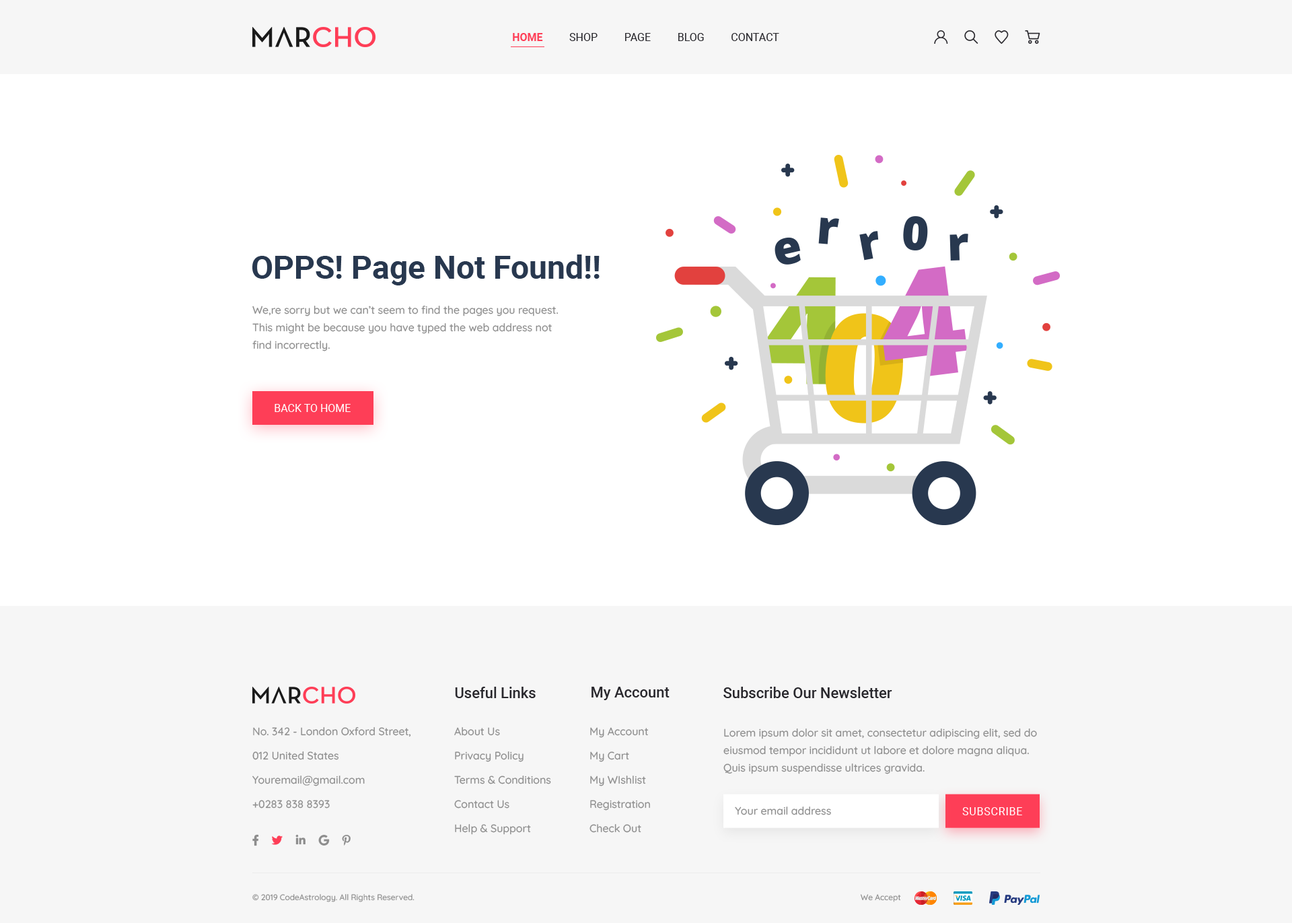
<style>
.page{position:relative;width:1292px;height:923px;background:#ffffff}
.page>*{position:absolute;margin:0}
.t1{font:10.8px "Roboto-Regular";color:#29282d}
.t2{font:10.8px "Roboto-Bold";color:#fe3e57}
.t3{font:32.3px "Roboto-Bold";color:#28384f}
.t4{font:10.8px/17.5px "Quicksand-Medium";color:#8d8d8d}
.t5{font:10.8px "Roboto-Regular";color:#ffffff}
.t6{font:14.8px "Roboto-Medium";color:#29282d}
.t7{font:10.8px/24.2px "Quicksand-Medium";color:#8d8d8d}
.t8{font:10.8px "Quicksand-Medium";color:#8d8d8d}
.t9{font:10.8px "Roboto-Regular";letter-spacing:0.05em;color:#ffffff;text-transform:uppercase}
.t10{font:8.1px "Quicksand-Medium";color:#8d8d8d}
</style>
<div class="page">
<p class="t1" style="left:513px;top:33px;width:266px;height:8px"><span class="t2">HOME          </span>SHOP          PAGE          BLOG          CONTACT</p>
<p class="t3" style="left:252px;top:254px;width:348px;height:31px">OPPS! Page Not Found!!</p>
<p class="t4" style="left:252px;top:306px;width:307px;height:45px">We,re sorry but we can’t seem to find the pages you request. This might be because you have typed the web address not find incorrectly.</p>
<p class="t5" style="left:275px;top:404px;width:76px;height:8px">BACK TO HOME</p>
<p class="t6" style="left:455px;top:687px;width:81px;height:11px">Useful Links</p>
<p class="t6" style="left:592px;top:687px;width:78px;height:13px">My Account</p>
<p class="t6" style="left:724px;top:687px;width:168px;height:11px">Subscribe Our Newsletter</p>
<p class="t7" style="left:252px;top:727px;width:159px;height:81px">No. 342 - London Oxford Street,<br>012 United States<br>Youremail@gmail.com<br>+0283 838 8393</p>
<p class="t7" style="left:454px;top:727px;width:97px;height:108px">About Us<br>Privacy Policy<br>Terms &amp; Conditions<br>Contact Us<br>Help &amp; Support</p>
<p class="t7" style="left:590px;top:727px;width:60px;height:106px">My Account<br>My Cart<br>My WIshlist<br>Registration<br>Check Out</p>
<p class="t4" style="left:724px;top:728px;width:313px;height:46px">Lorem ipsum dolor sit amet, consectetur adipiscing elit, sed do eiusmod tempor incididunt ut labore et dolore magna aliqua. Quis ipsum suspendisse ultrices gravida.</p>
<p class="t8" style="left:735px;top:806px;width:96px;height:9px">Your email address</p>
<p class="t9" style="left:962px;top:807px;width:60px;height:8px">Subscribe</p>
<p class="t10" style="left:252px;top:894px;width:163px;height:8px">© 2019 CodeAstrology. All Rights Reserved.</p>
<p class="t10" style="left:861px;top:894px;width:40px;height:8px">We Accept</p>
</div>
